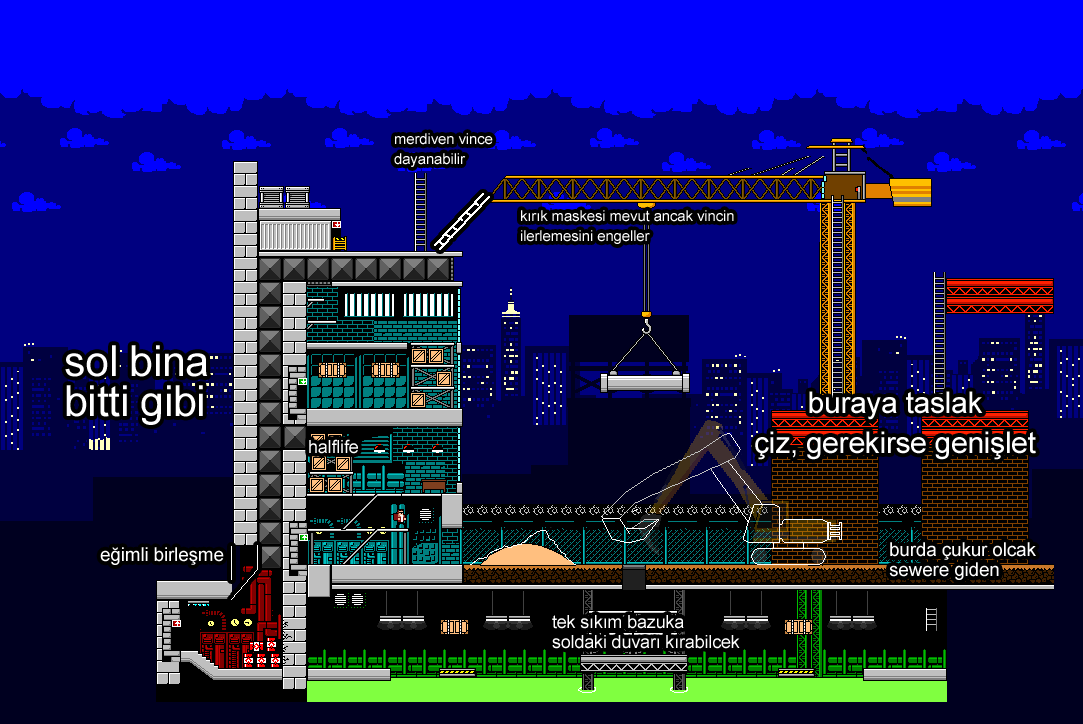
<style>
.page{position:relative;width:1083px;height:724px;background:#000080}
.page>*{position:absolute;margin:0}
.t1{font:15px/20px "ArialMT";letter-spacing:-0.01em;color:#ffffff}
.t2{font:43px/20px "ArialMT";letter-spacing:-0.01em;color:#ffffff}
.t3{font:30px/20px "ArialMT";letter-spacing:-0.01em;color:#ffffff}
.t4{font:18px "ArialMT";letter-spacing:-0.01em;color:#ffffff}
.t5{font:19px/20px "ArialMT";letter-spacing:-0.01em;color:#ffffff}
.t6{font:19px "ArialMT";letter-spacing:-0.01em;color:#ffffff}
.t7{font:18px/20px "ArialMT";letter-spacing:-0.01em;color:#ffffff}
</style>
<div class="page">
<p class="t1" style="left:394px;top:133px;width:99px;height:34px;text-align:justify">merdiven vince<br>dayanabilir</p>
<p class="t1" style="left:521px;top:210px;width:213px;height:34px;text-align:justify">kırık maskesi mevut ancak vincin<br>ilerlemesini engeller</p>
<p class="t2" style="left:65px;top:345px;width:143px;height:80px;text-align:justify">sol bina<br><br>bitti gibi</p>
<p class="t3" style="left:755px;top:391px;width:281px;height:69px;text-align:center">buraya taslak<br><br>çiz, gerekirse genişlet</p>
<p class="t4" style="left:309px;top:439px;width:49px;height:15px">halflife</p>
<p class="t5" style="left:889px;top:542px;width:147px;height:38px;text-align:justify">burda çukur olcak<br>sewere giden</p>
<p class="t6" style="left:100px;top:547px;width:124px;height:18px">eğimli birleşme</p>
<p class="t7" style="left:552px;top:615px;width:188px;height:34px;text-align:justify">tek sıkım bazuka<br>soldaki duvarı kırabilcek</p>
</div>
